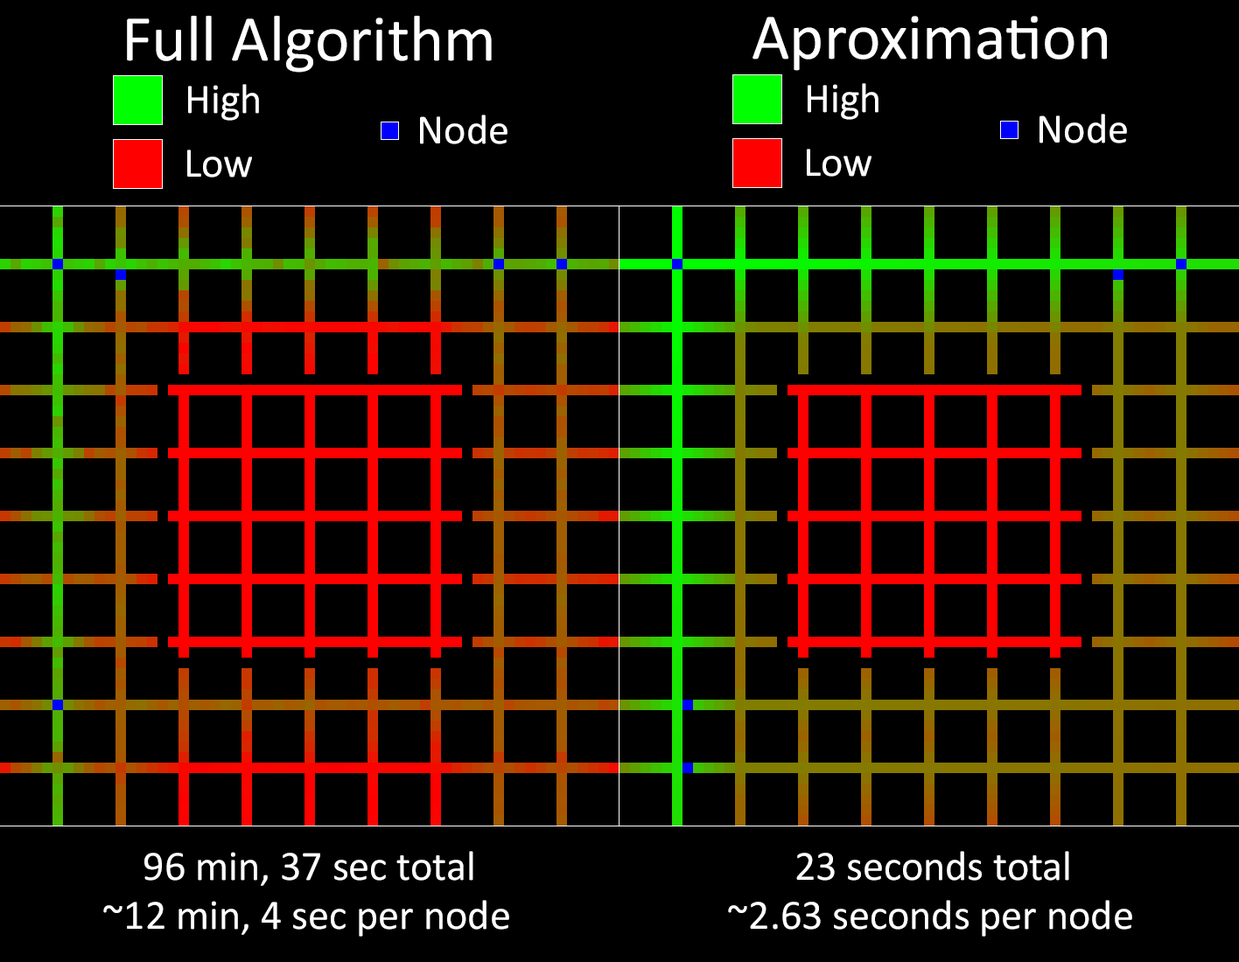
<style>
.page{position:relative;width:1239px;height:962px;background:#000000}
.page>*{position:absolute;margin:0}
.t1{font:65.6px "Calibri";color:#ffffff}
.t2{font:42px "Calibri";color:#ffffff}
</style>
<div class="page">
<p class="t1" style="left:127px;top:16px;width:365px;height:57px">Full Algorithm</p>
<p class="t1" style="left:752px;top:16px;width:355px;height:55px">Aproximation</p>
<p class="t2" style="left:188px;top:84px;width:71px;height:37px">High</p>
<p class="t2" style="left:808px;top:83px;width:70px;height:37px">High</p>
<p class="t2" style="left:1039px;top:114px;width:88px;height:29px">Node</p>
<p class="t2" style="left:420px;top:115px;width:87px;height:29px">Node</p>
<p class="t2" style="left:187px;top:150px;width:65px;height:28px">Low</p>
<p class="t2" style="left:807px;top:149px;width:64px;height:28px">Low</p>
<p class="t2" style="left:144px;top:851px;width:329px;height:35px">96 min, 37 sec total</p>
<p class="t2" style="left:796px;top:851px;width:273px;height:30px">23 seconds total</p>
<p class="t2" style="left:103px;top:900px;width:406px;height:37px">~12 min, 4 sec per node</p>
<p class="t2" style="left:728px;top:900px;width:404px;height:37px">~2.63 seconds per node</p>
</div>
